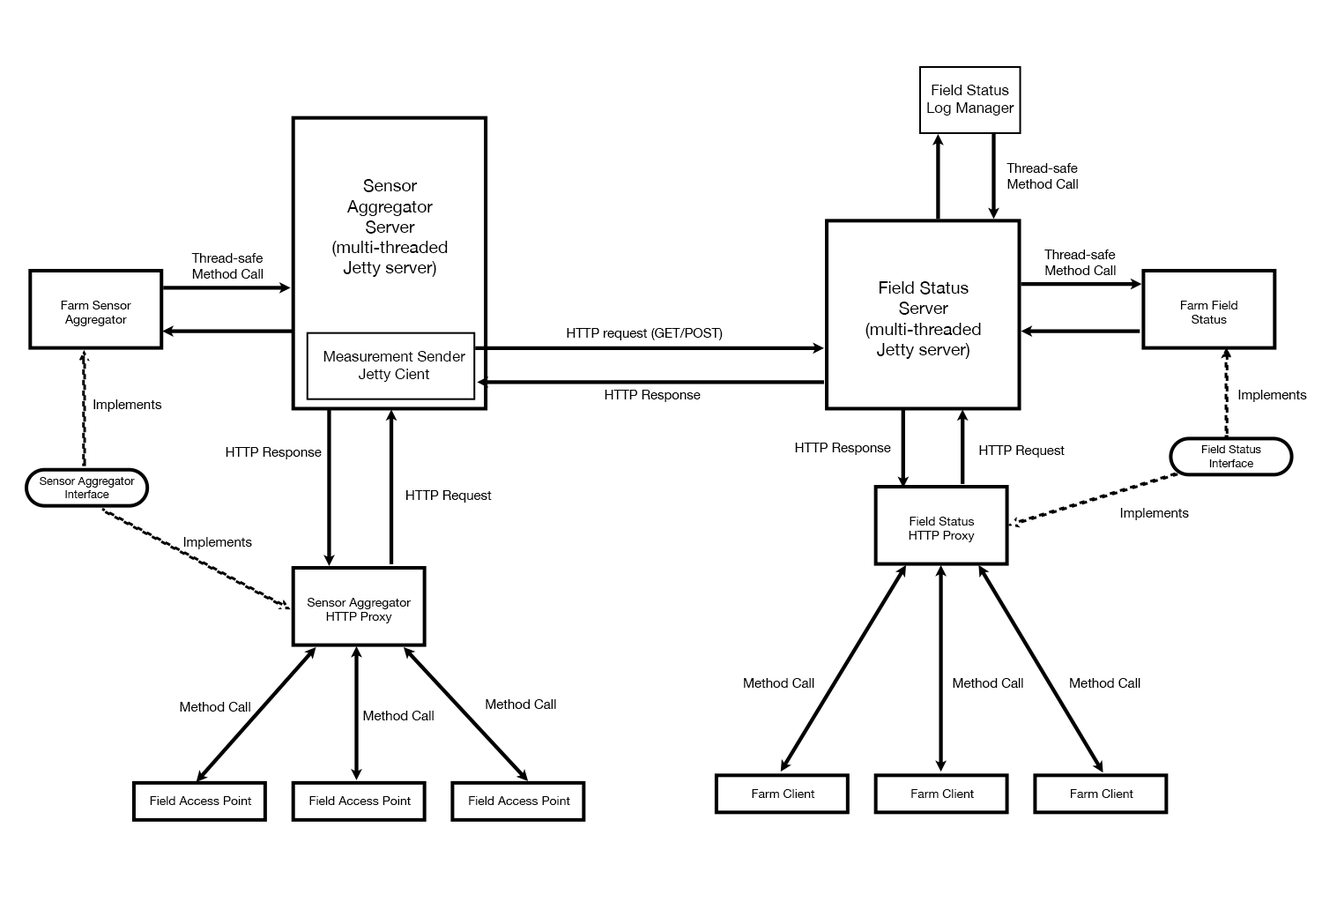
<style>
.page{position:relative;width:1322px;height:902px;background:#ffffff}
.page>*{position:absolute;margin:0}
.t1{font:14.8px "HelveticaNeue";color:#000000}
.t2{font:13.2px "HelveticaNeue";color:#000000}
.t3{font:17.1px "HelveticaNeue";color:#000000}
.t4{font:12.3px "HelveticaNeue";color:#000000}
.t5{font:11.3px "HelveticaNeue";color:#000000}
</style>
<div class="page">
<p class="t1" style="left:927px;top:85px;width:88px;height:30px;text-align:center">Field Status<br>Log Manager</p>
<p class="t2" style="left:1007px;top:163px;width:71px;height:26px">Thread-safe<br>Method Call</p>
<p class="t3" style="left:332px;top:179px;width:116px;height:98px;text-align:center">Sensor <br>Aggregator Server<br>(multi-threaded Jetty server)</p>
<p class="t2" style="left:191px;top:253px;width:73px;height:26px">Thread-safe <br>Method Call</p>
<p class="t2" style="left:1045px;top:249px;width:71px;height:26px">Thread-safe<br>Method Call</p>
<p class="t3" style="left:866px;top:281px;width:115px;height:78px;text-align:center">Field Status Server<br>(multi-threaded Jetty server)</p>
<p class="t4" style="left:61px;top:301px;width:70px;height:25px;text-align:center">Farm Sensor <br>Aggregator</p>
<p class="t4" style="left:1181px;top:301px;width:57px;height:23px;text-align:center">Farm Field<br>Status</p>
<p class="t2" style="left:567px;top:328px;width:156px;height:12px">HTTP request (GET/POST)</p>
<p class="t1" style="left:324px;top:351px;width:141px;height:31px;text-align:center">Measurement Sender<br>Jetty Cient</p>
<p class="t2" style="left:605px;top:390px;width:96px;height:12px">HTTP Response</p>
<p class="t2" style="left:1239px;top:390px;width:68px;height:12px">Implements</p>
<p class="t2" style="left:93px;top:399px;width:69px;height:13px">Implements</p>
<p class="t2" style="left:226px;top:447px;width:96px;height:12px">HTTP Response</p>
<p class="t2" style="left:795px;top:443px;width:96px;height:12px">HTTP Response</p>
<p class="t2" style="left:979px;top:445px;width:86px;height:13px">HTTP Request</p>
<p class="t5" style="left:1202px;top:445px;width:59px;height:22px;text-align:center">Field Status<br>Interface</p>
<p class="t5" style="left:40px;top:477px;width:95px;height:21px;text-align:center">Sensor Aggregator Interface</p>
<p class="t2" style="left:406px;top:490px;width:86px;height:12px">HTTP Request</p>
<p class="t2" style="left:1120px;top:508px;width:69px;height:12px">Implements</p>
<p class="t4" style="left:909px;top:517px;width:66px;height:25px;text-align:center">Field Status<br>HTTP Proxy</p>
<p class="t2" style="left:183px;top:537px;width:69px;height:12px">Implements</p>
<p class="t4" style="left:307px;top:598px;width:104px;height:25px;text-align:center">Sensor Aggregator HTTP Proxy</p>
<p class="t2" style="left:744px;top:678px;width:71px;height:10px">Method Call</p>
<p class="t2" style="left:953px;top:678px;width:70px;height:10px">Method Call</p>
<p class="t2" style="left:1070px;top:678px;width:71px;height:10px">Method Call</p>
<p class="t2" style="left:180px;top:702px;width:70px;height:9px">Method Call</p>
<p class="t2" style="left:486px;top:699px;width:70px;height:10px">Method Call</p>
<p class="t2" style="left:363px;top:711px;width:71px;height:9px">Method Call</p>
<p class="t4" style="left:150px;top:796px;width:102px;height:9px">Field Access Point</p>
<p class="t4" style="left:309px;top:796px;width:102px;height:9px">Field Access Point</p>
<p class="t4" style="left:469px;top:796px;width:101px;height:9px">Field Access Point</p>
<p class="t4" style="left:752px;top:789px;width:63px;height:9px">Farm Client</p>
<p class="t4" style="left:911px;top:789px;width:63px;height:9px">Farm Client</p>
<p class="t4" style="left:1071px;top:789px;width:63px;height:9px">Farm Client</p>
</div>
